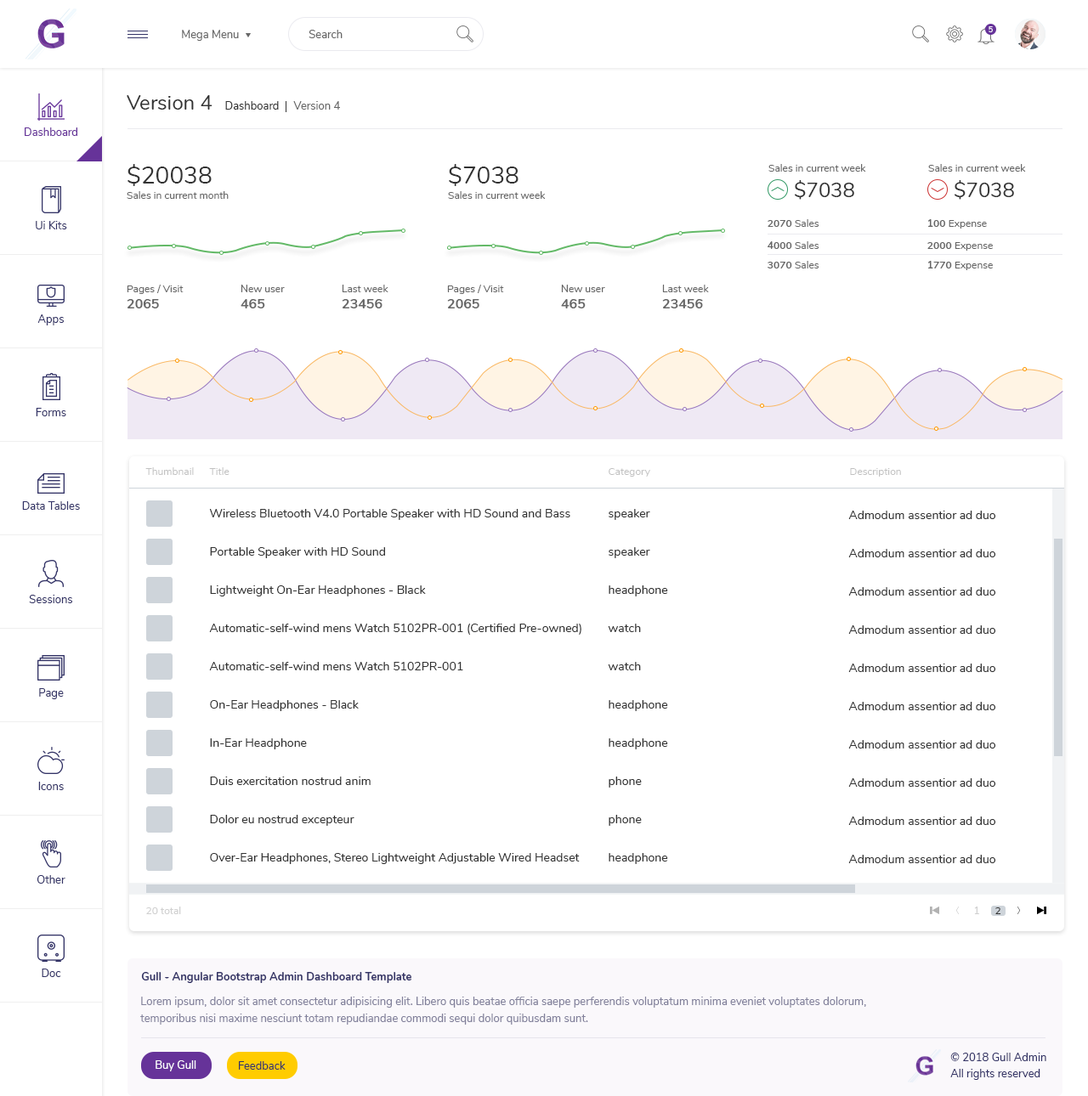
<style>
.page{position:relative;width:1088px;height:1096px;background:#ffffff}
.page>*{position:absolute;margin:0}
.t1{font:11px "Nunito-Regular";color:#666666}
.t2{font:7.6px "Nunito-SemiBold";color:#ffffff}
.t3{font:20.4px "Nunito-Regular";color:#333333}
.t4{font:11px "Nunito-Regular";color:#333333}
.t5{font:11px "Nunito-Regular";color:#663399}
.t6{font:23.8px "Nunito-Regular";color:#333333}
.t7{font:10.2px "Nunito-Regular";color:#666666}
.t8{font:11px "Nunito-Regular";color:#333366}
.t9{font:10.2px "Nunito-Bold";color:#666666}
.t10{font:13.6px "Nunito-Bold";color:#666666}
.t11{font:10.2px "Nunito-Regular";color:#c1c1c1}
.t12{font:11.9px "Nunito-Regular";color:#333333}
.t13{font:10.2px "Nunito-Regular";color:#d0d0d0}
.t14{font:10.2px "Nunito-Regular";color:#333333}
.t15{font:11px "Nunito-Bold";color:#333366}
.t16{font:11px/17px "Nunito-Regular";color:#82819b}
.t17{font:11px "Nunito-Regular";color:#ffffff}
</style>
<div class="page">
<p class="t1" style="left:182px;top:30px;width:57px;height:11px">Mega Menu</p>
<p class="t1" style="left:308px;top:30px;width:34px;height:8px">Search</p>
<p class="t2" style="left:988px;top:26px;width:5px;height:6px">5</p>
<p class="t3" style="left:127px;top:95px;width:85px;height:15px">Version 4</p>
<p class="t4" style="left:225px;top:101px;width:54px;height:9px">Dashboard</p>
<p class="t1" style="left:293px;top:101px;width:47px;height:9px">Version 4</p>
<p class="t5" style="left:25px;top:127px;width:52px;height:9px">Dashboard</p>
<p class="t6" style="left:127px;top:164px;width:85px;height:22px">$20038</p>
<p class="t6" style="left:449px;top:164px;width:69px;height:22px">$7038</p>
<p class="t7" style="left:768px;top:164px;width:98px;height:8px">Sales in current week</p>
<p class="t7" style="left:928px;top:164px;width:98px;height:8px">Sales in current week</p>
<p class="t3" style="left:795px;top:180px;width:59px;height:20px">$7038</p>
<p class="t3" style="left:954px;top:180px;width:60px;height:20px">$7038</p>
<p class="t7" style="left:127px;top:191px;width:102px;height:8px">Sales in current month</p>
<p class="t7" style="left:448px;top:191px;width:98px;height:8px">Sales in current week</p>
<p class="t8" style="left:36px;top:221px;width:31px;height:8px">Ui Kits</p>
<p class="t7" style="left:767px;top:219px;width:52px;height:8px"><span class="t9">2070 </span>Sales</p>
<p class="t7" style="left:927px;top:219px;width:60px;height:10px"><span class="t9">100 </span>Expense</p>
<p class="t7" style="left:767px;top:241px;width:52px;height:8px"><span class="t9">4000 </span>Sales</p>
<p class="t7" style="left:927px;top:242px;width:66px;height:9px"><span class="t9">2000 </span>Expense</p>
<p class="t7" style="left:767px;top:261px;width:52px;height:8px"><span class="t9">3070 </span>Sales</p>
<p class="t7" style="left:927px;top:261px;width:66px;height:9px"><span class="t9">1770 </span>Expense</p>
<p class="t7" style="left:127px;top:285px;width:57px;height:9px">Pages / Visit</p>
<p class="t7" style="left:240px;top:285px;width:45px;height:7px">New user</p>
<p class="t7" style="left:342px;top:285px;width:46px;height:7px">Last week</p>
<p class="t7" style="left:447px;top:285px;width:57px;height:9px">Pages / Visit</p>
<p class="t7" style="left:561px;top:285px;width:44px;height:7px">New user</p>
<p class="t7" style="left:662px;top:285px;width:47px;height:7px">Last week</p>
<p class="t10" style="left:127px;top:299px;width:32px;height:9px">2065</p>
<p class="t10" style="left:240px;top:299px;width:25px;height:9px">465</p>
<p class="t10" style="left:342px;top:299px;width:40px;height:9px">23456</p>
<p class="t10" style="left:447px;top:299px;width:32px;height:9px">2065</p>
<p class="t10" style="left:561px;top:299px;width:25px;height:9px">465</p>
<p class="t10" style="left:662px;top:299px;width:41px;height:9px">23456</p>
<p class="t8" style="left:37px;top:314px;width:27px;height:11px">Apps</p>
<p class="t8" style="left:36px;top:408px;width:30px;height:8px">Forms</p>
<p class="t11" style="left:145px;top:467px;width:49px;height:8px">Thumbnail</p>
<p class="t11" style="left:209px;top:467px;width:20px;height:8px">Title</p>
<p class="t11" style="left:608px;top:468px;width:42px;height:9px">Category</p>
<p class="t11" style="left:850px;top:468px;width:51px;height:9px">Description</p>
<p class="t8" style="left:22px;top:501px;width:58px;height:9px">Data Tables</p>
<p class="t12" style="left:209px;top:509px;width:361px;height:11px">Wireless Bluetooth V4.0 Portable Speaker with HD Sound and Bass</p>
<p class="t12" style="left:608px;top:509px;width:42px;height:11px">speaker</p>
<p class="t12" style="left:848px;top:511px;width:147px;height:8px">Admodum assentior ad duo</p>
<p class="t12" style="left:210px;top:547px;width:175px;height:11px">Portable Speaker with HD Sound</p>
<p class="t12" style="left:608px;top:547px;width:42px;height:11px">speaker</p>
<p class="t12" style="left:848px;top:549px;width:147px;height:8px">Admodum assentior ad duo</p>
<p class="t12" style="left:210px;top:586px;width:216px;height:11px">Lightweight On-Ear Headphones - Black</p>
<p class="t12" style="left:608px;top:586px;width:60px;height:11px">headphone</p>
<p class="t12" style="left:848px;top:587px;width:147px;height:9px">Admodum assentior ad duo</p>
<p class="t8" style="left:29px;top:595px;width:43px;height:8px">Sessions</p>
<p class="t12" style="left:209px;top:624px;width:372px;height:11px">Automatic-self-wind mens Watch 5102PR-001 (Certified Pre-owned)</p>
<p class="t12" style="left:608px;top:624px;width:33px;height:8px">watch</p>
<p class="t12" style="left:848px;top:625px;width:147px;height:9px">Admodum assentior ad duo</p>
<p class="t12" style="left:209px;top:662px;width:254px;height:8px">Automatic-self-wind mens Watch 5102PR-001</p>
<p class="t12" style="left:608px;top:662px;width:33px;height:8px">watch</p>
<p class="t12" style="left:848px;top:664px;width:147px;height:8px">Admodum assentior ad duo</p>
<p class="t8" style="left:39px;top:688px;width:25px;height:11px">Page</p>
<p class="t12" style="left:210px;top:700px;width:149px;height:11px">On-Ear Headphones - Black</p>
<p class="t12" style="left:608px;top:700px;width:60px;height:11px">headphone</p>
<p class="t12" style="left:848px;top:702px;width:147px;height:8px">Admodum assentior ad duo</p>
<p class="t12" style="left:210px;top:738px;width:97px;height:12px">In-Ear Headphone</p>
<p class="t12" style="left:608px;top:738px;width:60px;height:12px">headphone</p>
<p class="t12" style="left:848px;top:740px;width:147px;height:9px">Admodum assentior ad duo</p>
<p class="t8" style="left:38px;top:782px;width:26px;height:8px">Icons</p>
<p class="t12" style="left:210px;top:777px;width:161px;height:8px">Duis exercitation nostrud anim</p>
<p class="t12" style="left:608px;top:777px;width:34px;height:11px">phone</p>
<p class="t12" style="left:848px;top:778px;width:147px;height:9px">Admodum assentior ad duo</p>
<p class="t12" style="left:210px;top:815px;width:144px;height:11px">Dolor eu nostrud excepteur</p>
<p class="t12" style="left:608px;top:815px;width:34px;height:11px">phone</p>
<p class="t12" style="left:848px;top:817px;width:147px;height:8px">Admodum assentior ad duo</p>
<p class="t12" style="left:210px;top:853px;width:370px;height:11px">Over-Ear Headphones, Stereo Lightweight Adjustable Wired Headset</p>
<p class="t12" style="left:608px;top:853px;width:60px;height:11px">headphone</p>
<p class="t12" style="left:848px;top:855px;width:147px;height:8px">Admodum assentior ad duo</p>
<p class="t8" style="left:37px;top:875px;width:28px;height:9px">Other</p>
<p class="t13" style="left:146px;top:907px;width:35px;height:7px">20 total</p>
<p class="t13" style="left:974px;top:907px;width:5px;height:7px">1</p>
<p class="t14" style="left:995px;top:908px;width:6px;height:6px">2</p>
<p class="t8" style="left:42px;top:969px;width:19px;height:8px">Doc</p>
<p class="t15" style="left:141px;top:972px;width:270px;height:11px">Gull - Angular Bootstrap Admin Dashboard Template</p>
<p class="t16" style="left:140px;top:997px;width:726px;height:28px">Lorem ipsum, dolor sit amet consectetur adipisicing elit. Libero quis beatae officia saepe perferendis voluptatum minima eveniet voluptates dolorum, <br>temporibus nisi maxime nesciunt totam repudiandae commodi sequi dolor quibusdam sunt.</p>
<p class="t17" style="left:156px;top:1061px;width:40px;height:11px">Buy Gull</p>
<p class="t8" style="left:239px;top:1061px;width:47px;height:9px">Feedback</p>
<p class="t8" style="left:950px;top:1053px;width:96px;height:8px">© 2018 Gull Admin</p>
<p class="t8" style="left:950px;top:1069px;width:90px;height:11px">All rights reserved</p>
</div>
